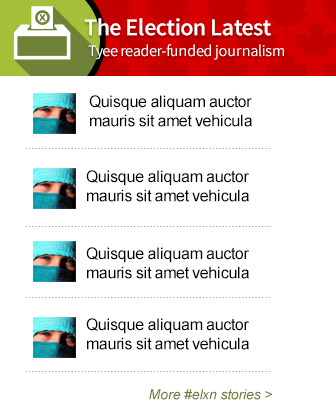
<style>
.page{position:relative;width:336px;height:419px;background:#ffffff}
.page>*{position:absolute;margin:0}
.t1{font:24px "SourceSansPro-Semibold";letter-spacing:-0.02em;color:#ffffff}
.t2{font:16px "SourceSansPro-Regular";letter-spacing:-0.02em;color:#ffffff}
.t3{font:16px "ArialMT";letter-spacing:-0.02em;color:#000000}
.t4{font:14px "Arial-ItalicMT";letter-spacing:-0.02em;color:#6c8036}
</style>
<div class="page">
<p class="t1" style="left:84px;top:18px;width:187px;height:18px">The Election Latest</p>
<p class="t2" style="left:88px;top:44px;width:196px;height:16px">Tyee reader-funded journalism</p>
<p class="t3" style="left:89px;top:95px;width:163px;height:32px">Quisque aliquam auctor mauris sit amet vehicula</p>
<p class="t3" style="left:86px;top:170px;width:163px;height:32px">Quisque aliquam auctor mauris sit amet vehicula</p>
<p class="t3" style="left:86px;top:247px;width:163px;height:32px">Quisque aliquam auctor mauris sit amet vehicula</p>
<p class="t3" style="left:86px;top:318px;width:163px;height:32px">Quisque aliquam auctor mauris sit amet vehicula</p>
<p class="t4" style="left:149px;top:389px;width:123px;height:11px">More #elxn stories &gt;</p>
</div>
